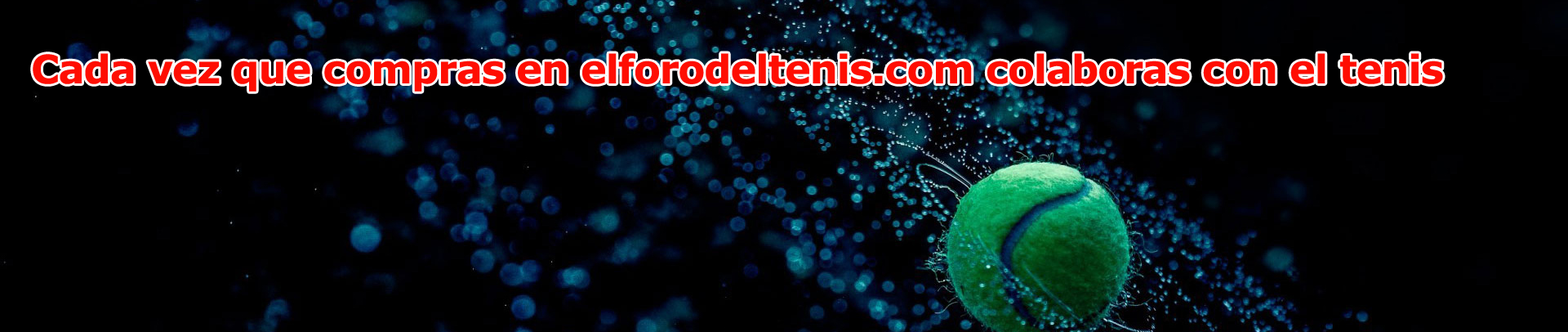
<style>
.page{position:relative;width:1568px;height:332px;background:#000000}
.page>*{position:absolute;margin:0}
.t1{font:39.2px "Verdana-Bold";letter-spacing:-0.025em;color:#fe0e02}
</style>
<div class="page">
<p class="t1" style="left:33px;top:53px;width:1410px;height:38px">Cada vez que compras en elforodeltenis.com colaboras con el tenis</p>
</div>
